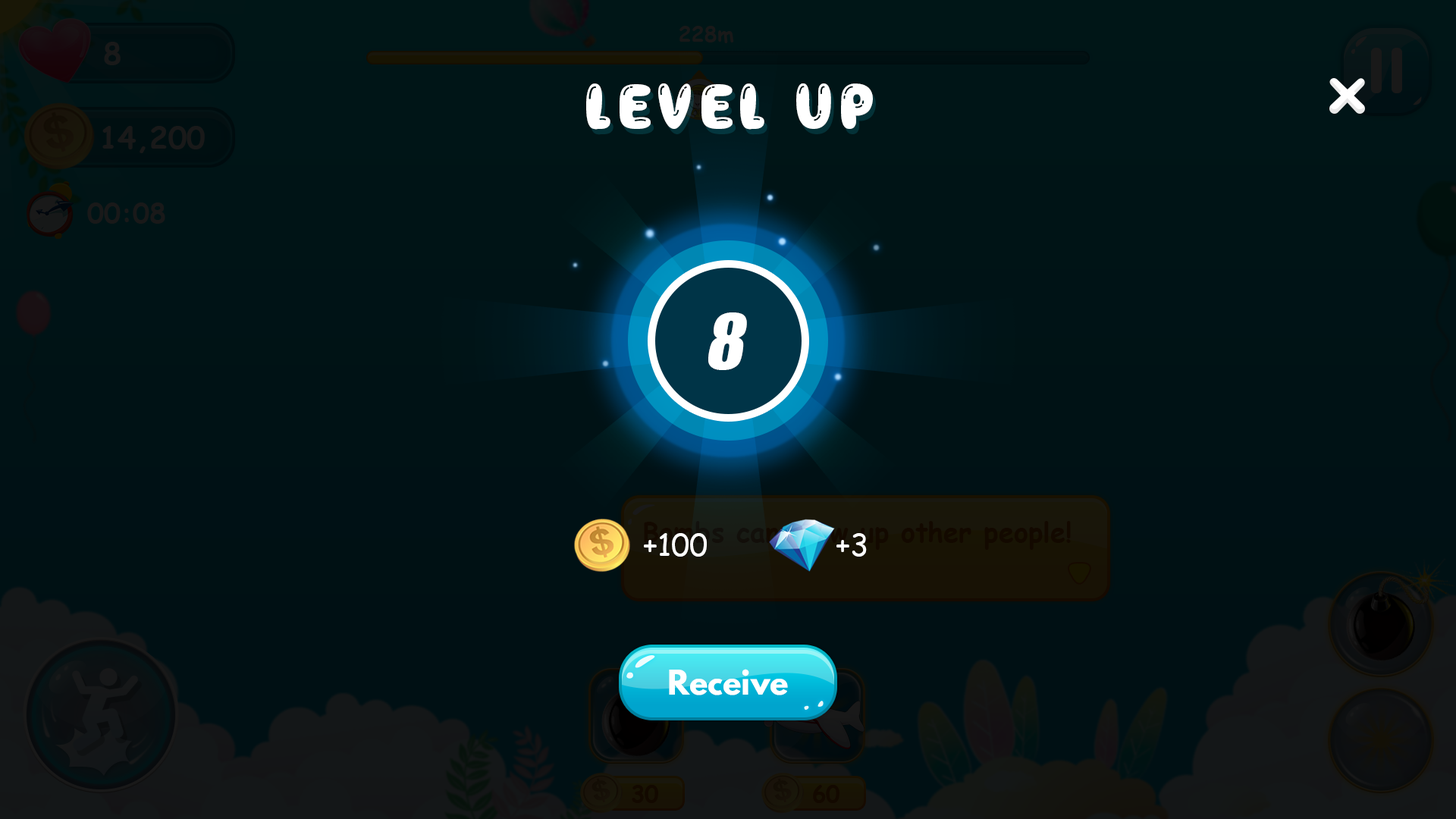
<style>
.page{position:relative;width:1456px;height:819px}
.page>*{position:absolute;margin:0}
.t1{font:60.7px "Balloon";letter-spacing:0.1em;color:#ffffff}
.t2{font:71.5px "Impact";color:#ffffff;font-style:italic}
.t3{font:30.3px "ComicSansMS";color:#ffffff}
.t4{font:30.3px "LeagueSpartan-Bold";color:#ffffff}
</style>
<div class="page">
<p class="t1" style="left:586px;top:83px;width:287px;height:47px">LEVEL UP</p>
<p class="t2" style="left:708px;top:312px;width:39px;height:58px">8</p>
<p class="t3" style="left:644px;top:533px;width:63px;height:24px">+100</p>
<p class="t3" style="left:836px;top:533px;width:31px;height:24px">+3</p>
<p class="t4" style="left:669px;top:669px;width:119px;height:26px">Receive</p>
</div>
